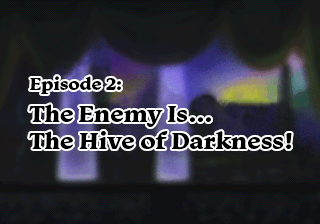
<style>
.page{position:relative;width:320px;height:224px;background:#191919}
.page>*{position:absolute;margin:0}
.t1{font:24px/27px "Monarcha-Bold";color:#000000}
.t2{font:18px/30px "Monarcha-Bold";color:#000000}
.t3{font:24px/32px "Monarcha-Bold";color:#000000}
</style>
<div class="page">
<p class="t1" style="left:29px;top:76px;width:263px;height:74px"><span class="t2">Episode 2:<br></span><span class="t3">The Enemy Is... <br></span>The Hive of Darkness!</p>
</div>
